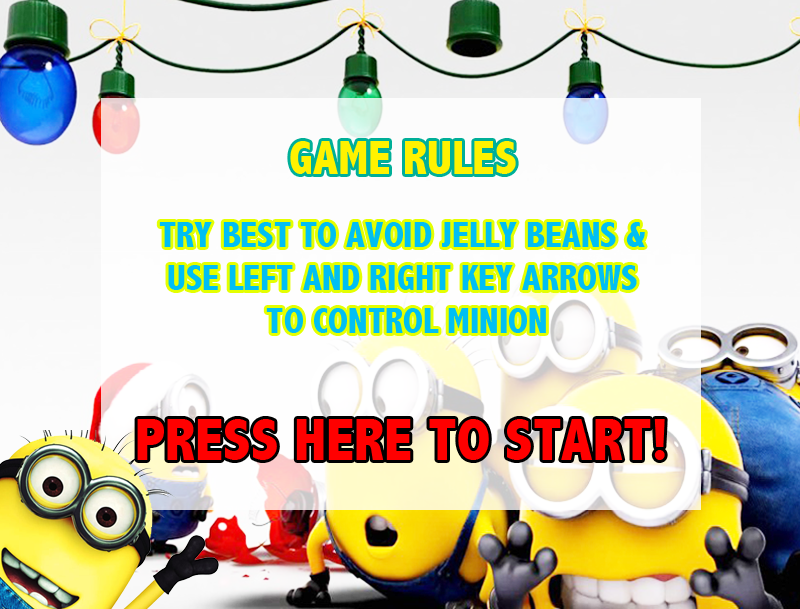
<style>
.page{position:relative;width:800px;height:609px}
.page>*{position:absolute;margin:0}
.t1{font:48px "AbadiMT-CondensedExtraBold";color:#fff200}
.t2{font:36px "AbadiMT-CondensedExtraBold";color:#00bff3}
.t3{font:60px "AbadiMT-CondensedExtraBold";color:#ff0000}
</style>
<div class="page">
<p class="t1" style="left:290px;top:141px;width:226px;height:33px">GAME RULES</p>
<p class="t2" style="left:159px;top:222px;width:486px;height:111px;text-align:center">TRY BEST TO AVOID JELLY BEANS &amp;<br>USE LEFT AND RIGHT KEY ARROWS<br> TO CONTROL MINION</p>
<p class="t3" style="left:137px;top:419px;width:528px;height:41px">PRESS HERE TO START!</p>
</div>
